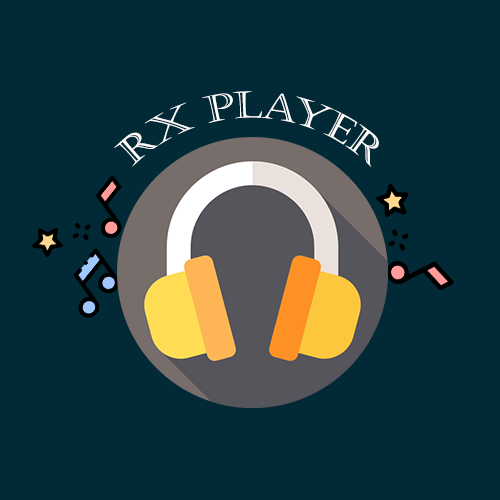
<style>
.page{position:relative;width:500px;height:500px;background:#012a36}
.page>*{position:absolute;margin:0}
.t1{font:36.7px/16px "Castellar";color:#ffffff}
</style>
<div class="page">
<p class="t1" style="left:114px;top:91px;width:265px;height:76px;text-align:center">RX Player</p>
</div>
